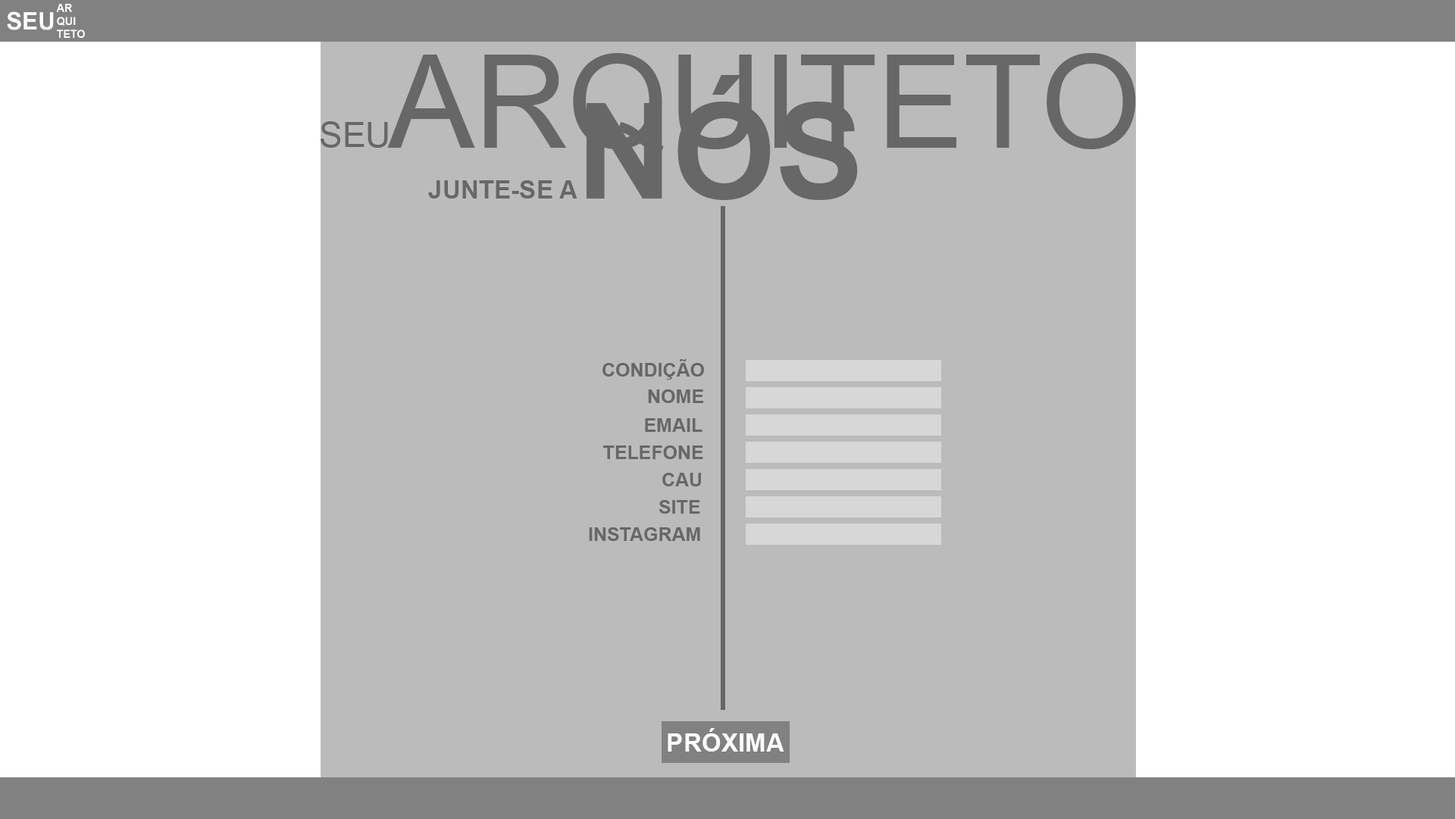
<style>
.page{position:relative;width:1455px;height:819px;background:#bbbbbb}
.page>*{position:absolute;margin:0}
.t1{font:18.9px "Arial-BoldMT";color:#676767}
.t2{font:25.3px "Arial-BoldMT";color:#ffffff}
</style>
<div class="page">
<p class="t1" style="left:603px;top:359px;width:101px;height:21px">CONDIÇÃO</p>
<p class="t1" style="left:648px;top:390px;width:55px;height:13px">NOME</p>
<p class="t1" style="left:645px;top:418px;width:58px;height:14px">EMAIL</p>
<p class="t1" style="left:603px;top:446px;width:100px;height:13px">TELEFONE</p>
<p class="t1" style="left:662px;top:473px;width:39px;height:14px">CAU</p>
<p class="t1" style="left:659px;top:500px;width:41px;height:14px">SITE</p>
<p class="t1" style="left:589px;top:528px;width:111px;height:13px">INSTAGRAM</p>
<p class="t2" style="left:668px;top:728px;width:117px;height:24px">PRÓXIMA</p>
</div>
